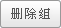
<style>
.page{position:relative;width:61px;height:28px}
.page>*{position:absolute;margin:0}
.t1{font:12px "SimSun";letter-spacing:0.16em;color:#555555}
</style>
<div class="page">
<p class="t1" style="left:11px;top:8px;width:39px;height:11px">删除组</p>
</div>
